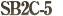
<style>
.page{position:relative;width:63px;height:16px;background:#ffffff}
.page>*{position:absolute;margin:0}
.t1{font:18px "RyuminPro-ExBold";letter-spacing:-0.06em;color:#4a3f32;font-weight:bold;scale:0.9 1}
</style>
<div class="page">
<p class="t1" style="left:0px;top:1px;width:52px;height:15px">SB2C-5</p>
</div>
